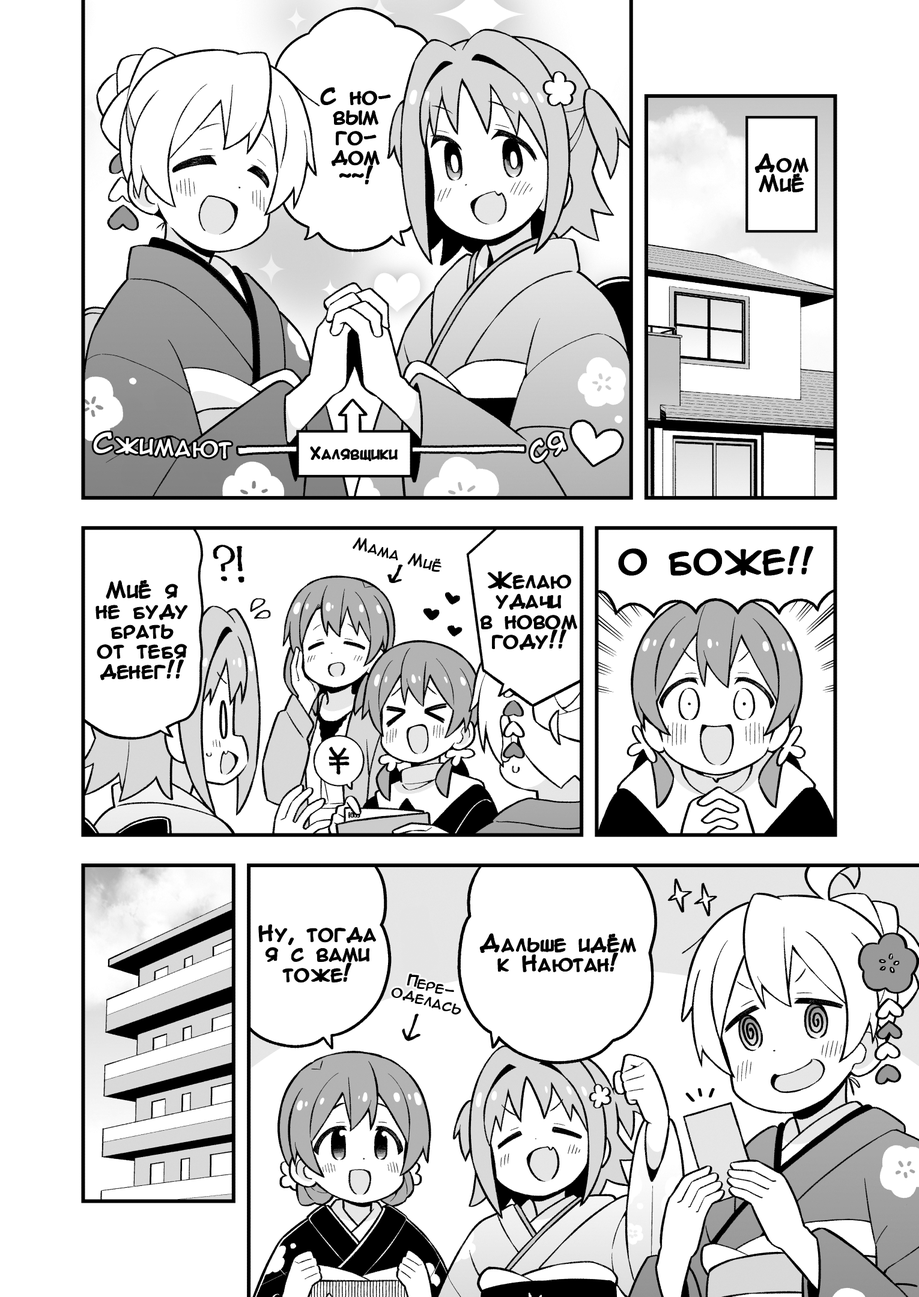
<style>
.page{position:relative;width:919px;height:1297px;background:#ffffff}
.page>*{position:absolute;margin:0}
.t1{font:20px/20px "AnimeAcev3";color:#000000;font-weight:bold}
.t2{font:25px "AnimeAcev3";color:#ffffff;font-weight:bold}
.t3{font:30px "AnimeAcev3";color:#ffffff;font-weight:bold}
.t4{font:15px "AnimeAcev3";color:#000000;font-weight:bold}
.t5{font:30px "AnimeAcev3";color:#000000;font-weight:bold}
.t6{font:15px/15px "AnimeAcev3";color:#000000;font-weight:bold}
</style>
<div class="page">
<p class="t1" style="left:321px;top:88px;width:69px;height:96px;text-align:center">С но-<br>вым<br>го-<br>дом<br>~~!</p>
<p class="t1" style="left:755px;top:154px;width:54px;height:38px;text-align:center">Дом<br>Миё</p>
<p class="t2" style="left:93px;top:432px;width:139px;height:27px;rotate:2deg">Сжимают</p>
<p class="t3" style="left:530px;top:432px;width:36px;height:31px;rotate:-23deg">ся</p>
<p class="t4" style="left:311px;top:447px;width:87px;height:14px">Халявщики</p>
<p class="t4" style="left:353px;top:538px;width:89px;height:34px;rotate:16deg">Мама Миё</p>
<p class="t5" style="left:619px;top:547px;width:194px;height:28px">О БОЖЕ!!</p>
<p class="t1" style="left:96px;top:580px;width:91px;height:100px;text-align:center">Миё я<br>не буду<br>брать<br>от тебя<br>денег!!</p>
<p class="t1" style="left:481px;top:572px;width:96px;height:78px;text-align:center">Желаю<br>удачи<br>в новом<br>году!!</p>
<p class="t1" style="left:259px;top:925px;width:117px;height:58px;text-align:center">Ну, тогда<br>я с вами<br>тоже!</p>
<p class="t1" style="left:480px;top:934px;width:156px;height:39px;text-align:center">Дальше идём<br>к Наютан!</p>
<p class="t6" style="left:391px;top:974px;width:70px;height:41px;text-align:center;rotate:16deg">Пере-<br>оделась</p>
</div>
